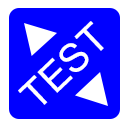
<style>
.page{position:relative;width:128px;height:128px;background:#0000ff}
.page>*{position:absolute;margin:0}
.t1{font:40px "ArialMT";color:#ffffff}
</style>
<div class="page">
<p class="t1" style="left:18px;top:21px;width:86px;height:84px;rotate:-44deg">TEST</p>
</div>
